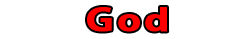
<style>
.page{position:relative;width:250px;height:39px;background:#ffffff}
.page>*{position:absolute;margin:0}
.t1{font:30.4px "AdobeGothicStd-Bold";letter-spacing:0.075em;color:#ff0000;font-weight:bold;scale:1.29 1}
</style>
<div class="page">
<p class="t1" style="left:87px;top:7px;width:81px;height:25px">God</p>
</div>
